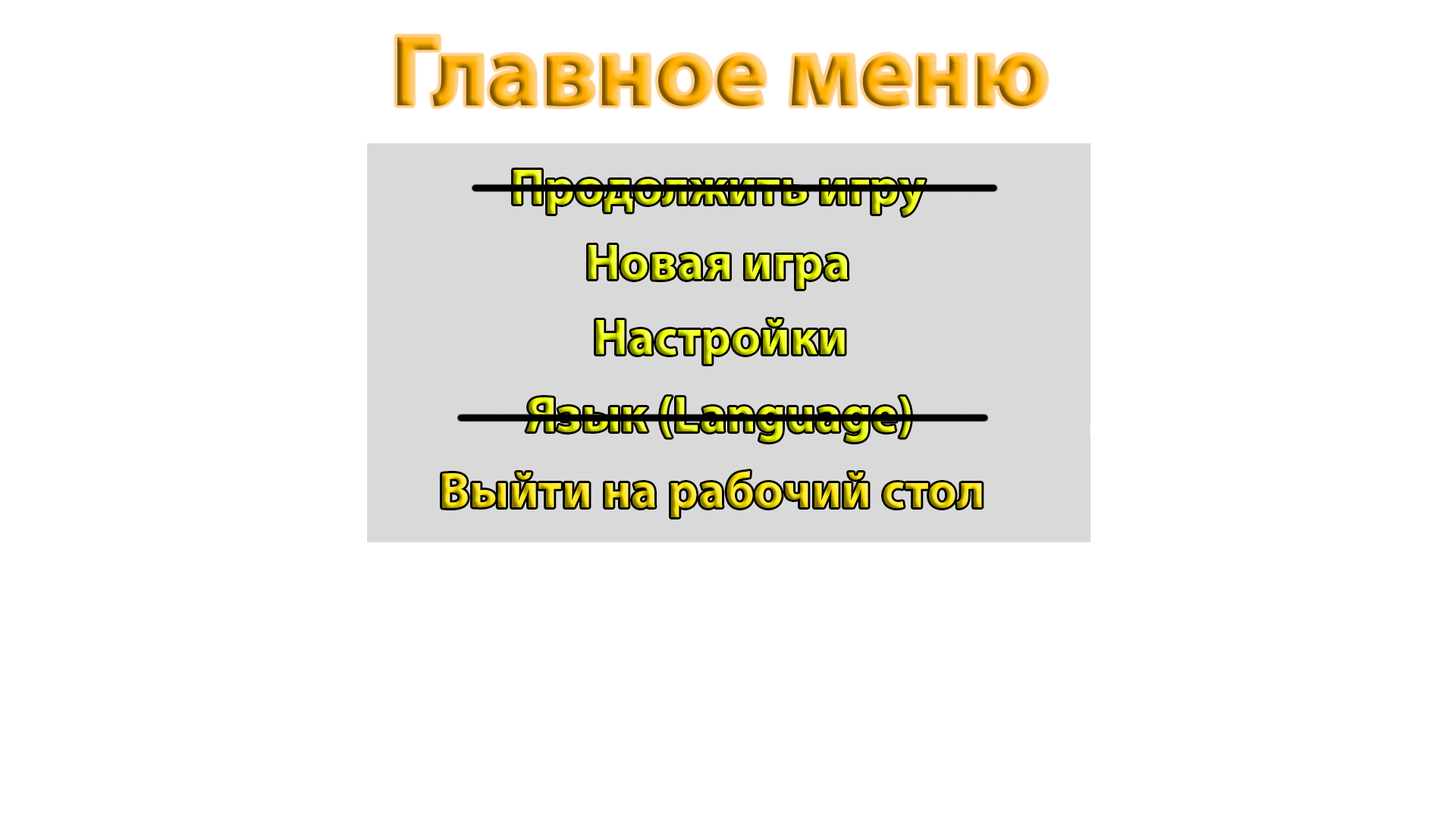
<style>
.page{position:relative;width:1456px;height:819px;background:#ffffff}
.page>*{position:absolute;margin:0}
.t1{font:101.1px "MyriadPro-Bold"}
.t2{font:50.6px "MyriadPro-Bold"}
</style>
<div class="page">
<p class="t1" style="left:397px;top:36px;width:649px;height:71px">Главное меню</p>
<p class="t2" style="left:513px;top:170px;width:412px;height:46px">Продолжить игру</p>
<p class="t2" style="left:588px;top:245px;width:260px;height:44px">Новая игра</p>
<p class="t2" style="left:596px;top:319px;width:249px;height:45px">Настройки</p>
<p class="t2" style="left:526px;top:397px;width:385px;height:45px">Язык (Language)</p>
<p class="t2" style="left:442px;top:471px;width:540px;height:46px">Выйти на рабочий стол</p>
</div>
